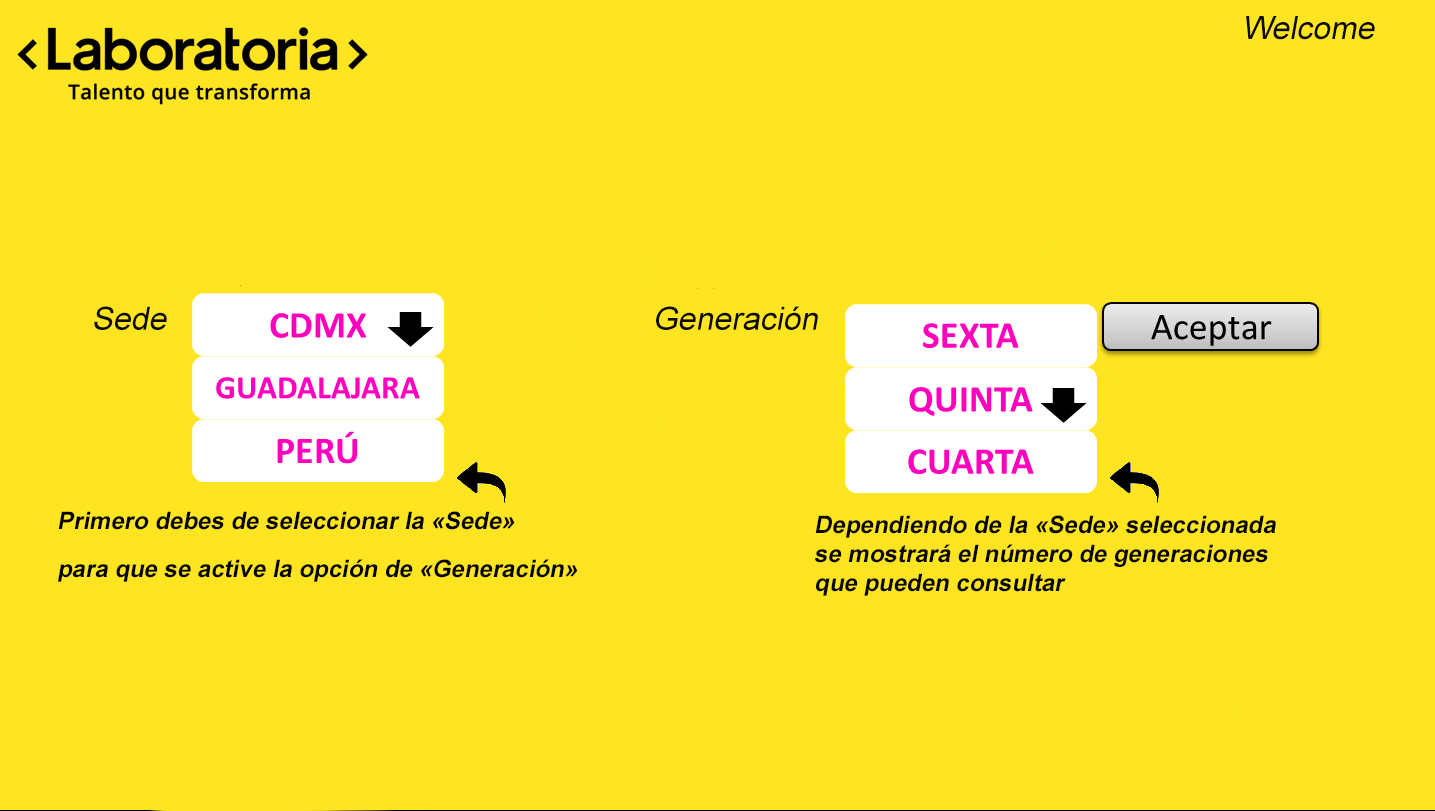
<style>
.page{position:relative;width:1435px;height:811px;background:#ffe521}
.page>*{position:absolute;margin:0}
.t1{font:32px "ArialMT";color:#0c0b02;font-style:italic}
.t2{font:24px "Arial-BoldMT";color:#030300;font-style:italic}
.t3{font:24px "Arial-BoldMT";color:#070707;font-style:italic}
</style>
<div class="page">
<p class="t1" style="left:1246px;top:16px;width:129px;height:24px">Welcome</p>
<p class="t1" style="left:94px;top:306px;width:73px;height:24px">Sede</p>
<p class="t1" style="left:656px;top:306px;width:162px;height:24px">Generación</p>
<p class="t2" style="left:58px;top:511px;width:520px;height:71px">Primero debes de seleccionar la «Sede» <br>para que se active la opción de «Generación»</p>
<p class="t3" style="left:815px;top:515px;width:461px;height:81px">Dependiendo de la «Sede» seleccionada <br>se mostrará el número de generaciones <br>que pueden consultar</p>
</div>
